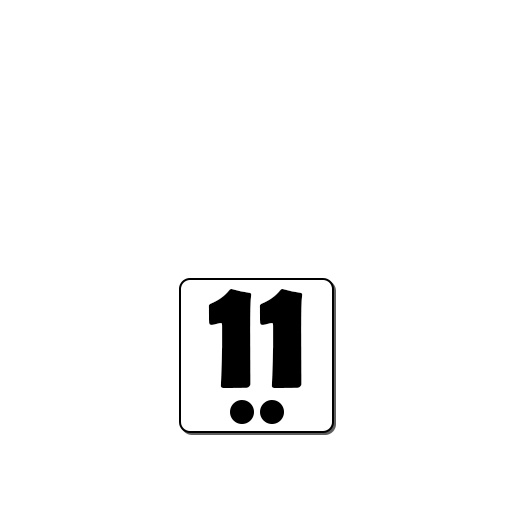
<style>
.page{position:relative;width:512px;height:512px;background:#ffffff}
.page>*{position:absolute;margin:0}
.t1{font:160px "BerlinSansFBDemi-Bold";color:#000000}
</style>
<div class="page">
<p class="t1" style="left:208px;top:289px;width:95px;height:99px">11</p>
</div>
